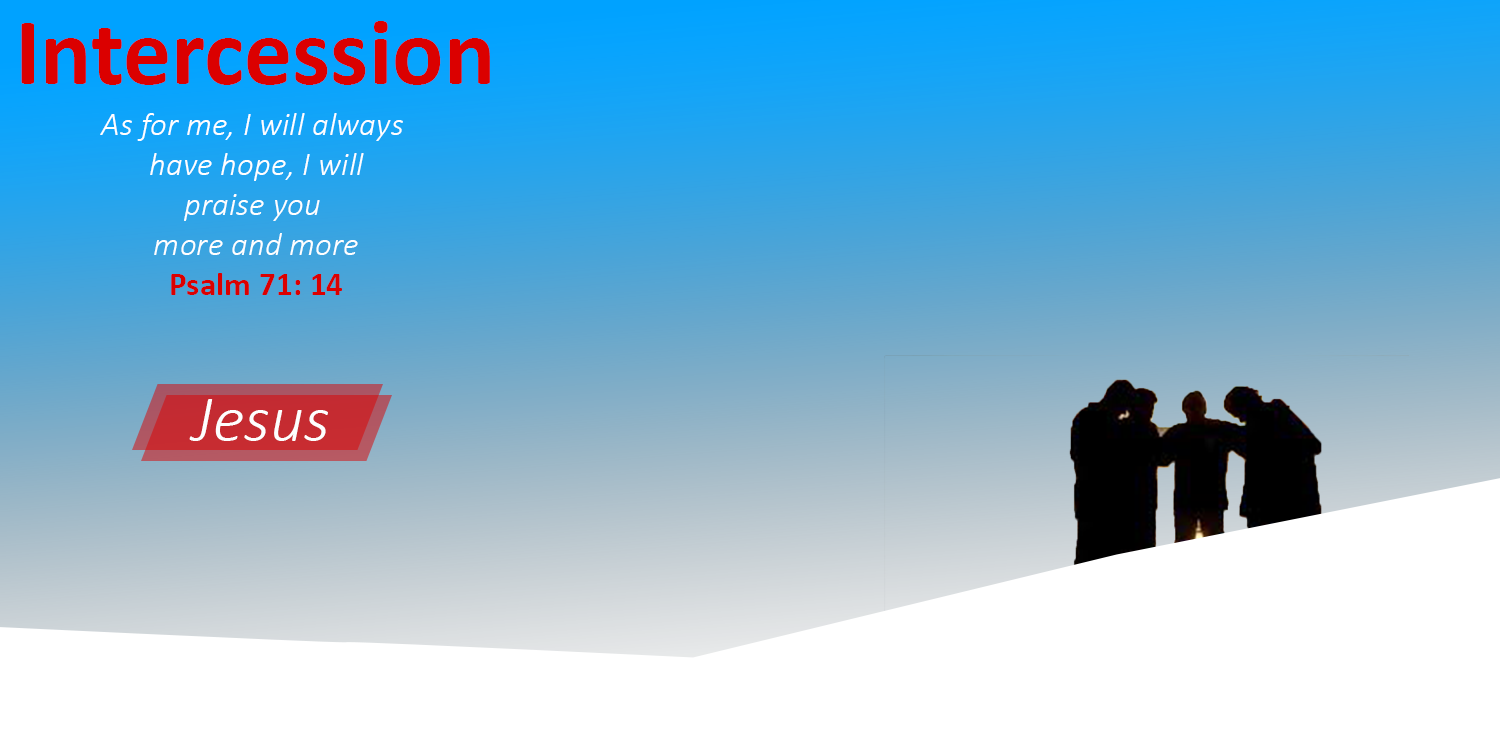
<style>
.page{position:relative;width:1500px;height:750px;background:#ffffff}
.page>*{position:absolute;margin:0}
.t1{font:95.8px "Calibri-Bold";color:#db0000}
.t2{font:33.3px "Calibri-LightItalic";color:#ffffff}
.t3{font:33.3px "Calibri-Bold";color:#db0000}
.t4{font:66.7px "Calibri-LightItalic";color:#fefefe}
</style>
<div class="page">
<p class="t1" style="left:21px;top:21px;width:469px;height:64px">Intercession</p>
<p class="t2" style="left:100px;top:113px;width:303px;height:182px;text-align:center">As for me, I will always <br>have hope, I will<br>praise you <br>more and more<br><span class="t3">Psalm 71: 14</span></p>
<p class="t4" style="left:189px;top:399px;width:139px;height:42px">Jesus</p>
</div>
